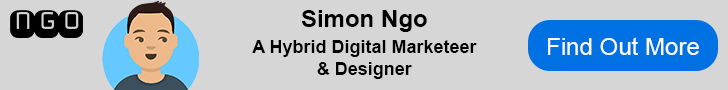
<style>
.page{position:relative;width:728px;height:90px;background:#d6d6d6}
.page>*{position:absolute;margin:0}
.t1{font:24px "Arial-BoldMT";color:#000000}
.t2{font:18px "Arial-BoldMT";color:#000000}
.t3{font:24px "ArialMT";color:#ffffff}
</style>
<div class="page">
<p class="t1" style="left:301px;top:10px;width:126px;height:22px">Simon Ngo</p>
<p class="t2" style="left:252px;top:40px;width:225px;height:39px;text-align:center">A Hybrid Digital Marketeer<br>&amp; Designer</p>
<p class="t3" style="left:548px;top:37px;width:151px;height:18px">Find Out More</p>
</div>
